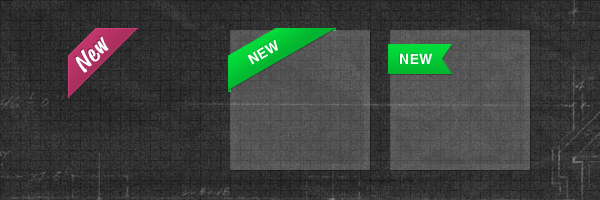
<style>
.page{position:relative;width:600px;height:200px}
.page>*{position:absolute;margin:0}
.t1{font:14px "Helvetica-Bold";letter-spacing:0.02em;color:#ffffff}
</style>
<div class="page">
<p class="t1" style="left:247px;top:39px;width:31px;height:26px;rotate:-30deg">NEW</p>
<p class="t1" style="left:400px;top:53px;width:33px;height:11px">NEW</p>
</div>
